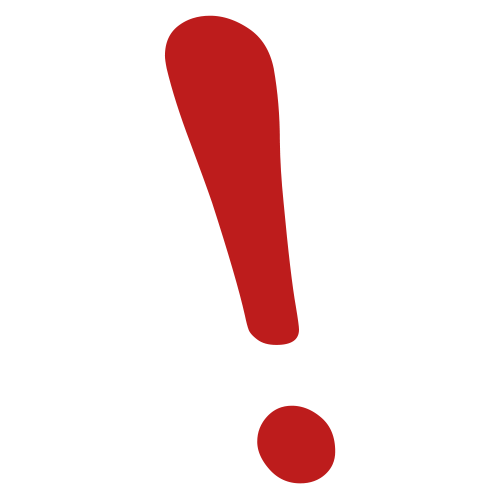
<style>
.page{position:relative;width:500px;height:500px;background:#ffffff}
.page>*{position:absolute;margin:0}
.t1{font:700px "LinLibertineZI";color:#bd1c1c}
</style>
<div class="page">
<p class="t1" style="left:164px;top:15px;width:172px;height:469px;rotate:180deg">!</p>
</div>
